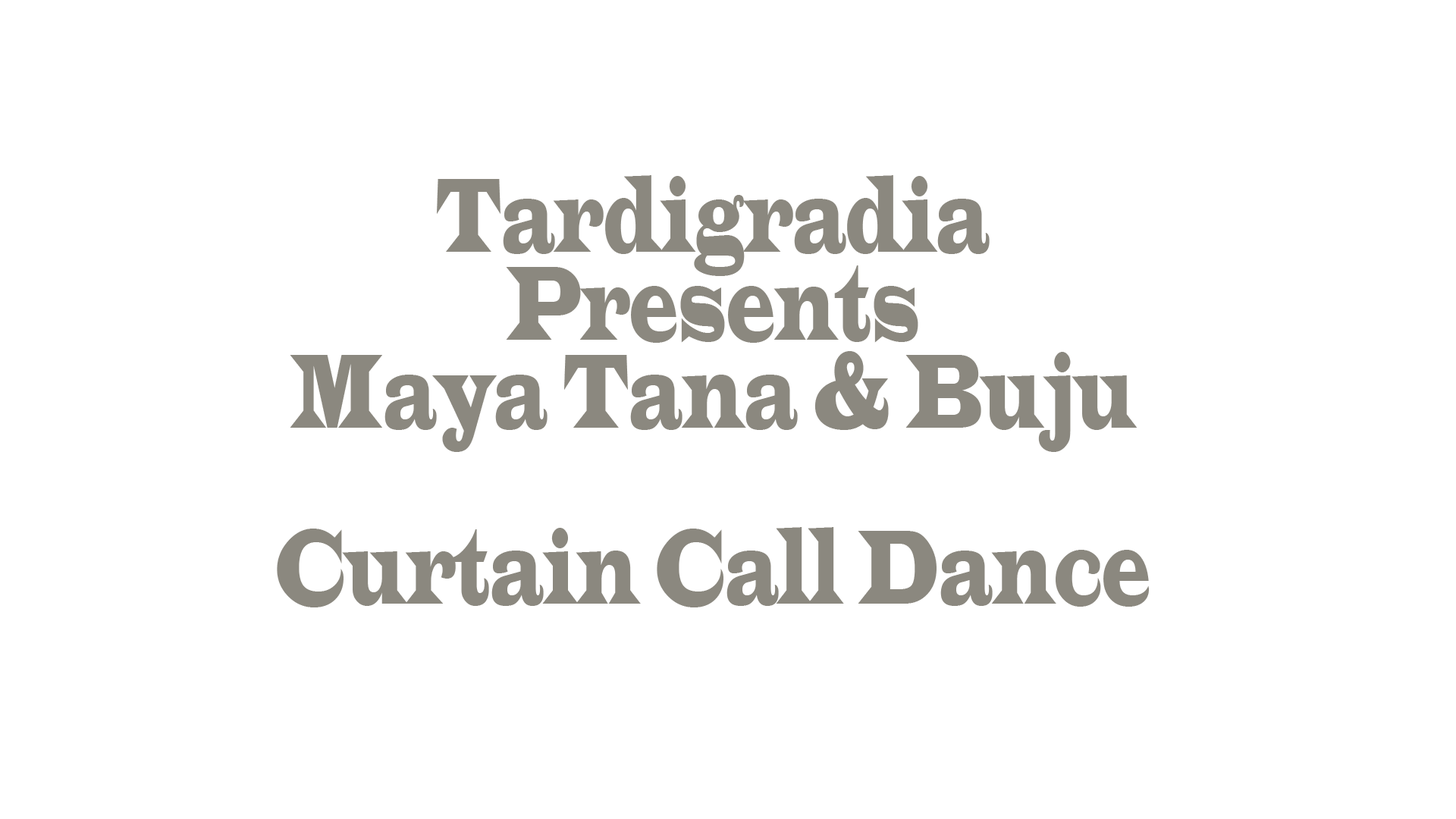
<style>
.page{position:relative;width:1456px;height:819px;background:#ffffff}
.page>*{position:absolute;margin:0}
.t1{font:109.2px/88px "LatinWide";color:#8b887f;scale:0.5 1}
</style>
<div class="page">
<p class="t1" style="left:277px;top:175px;width:872px;height:432px;text-align:center">Tardigradia<br>Presents<br>Maya Tana &amp; Buju<br><br>Curtain Call Dance</p>
</div>
